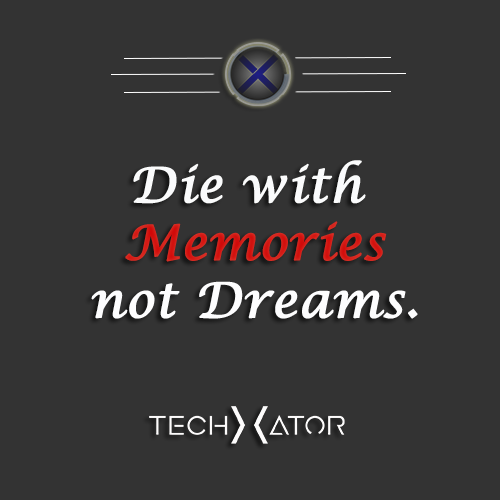
<style>
.page{position:relative;width:500px;height:500px;background:#333333}
.page>*{position:absolute;margin:0}
.t1{font:48px "LucidaCalligraphy-Italic";color:#fdfdfe;font-weight:bold}
.t2{font:48px "LucidaCalligraphy-Italic";color:#fafbfc;font-weight:bold}
.t3{font:48px "LucidaCalligraphy-Italic";color:#d00707;font-weight:bold}
</style>
<div class="page">
<p class="t1" style="left:91px;top:160px;width:327px;height:159px;text-align:center"><span class="t2">Die with <br></span><span class="t3">Memories<br></span>not Dreams.</p>
</div>
